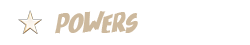
<style>
.page{position:relative;width:250px;height:45px;background:#ffffff}
.page>*{position:absolute;margin:0}
.t1{font:30px "HoustonComicsPersonalUse";color:#cdb99d}
</style>
<div class="page">
<p class="t1" style="left:55px;top:11px;width:83px;height:23px">POWERS</p>
</div>
